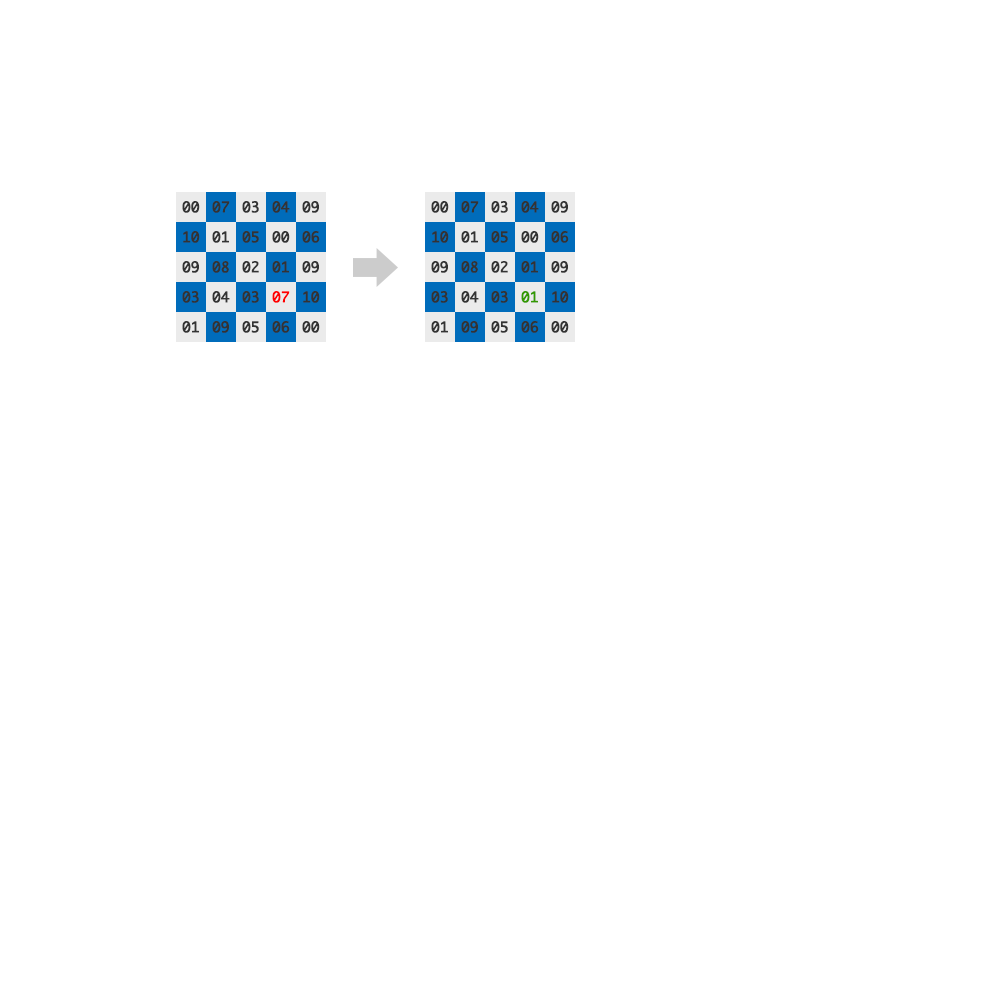
<style>
.page{position:relative;width:1000px;height:1000px;background:#ffffff}
.page>*{position:absolute;margin:0}
.t1{font:14px "Monaco";color:#333333;font-weight:bold}
.t2{font:14px "Monaco";color:#ff0000;font-weight:bold}
.t3{font:14px "Monaco";color:#339900;font-weight:bold}
</style>
<div class="page">
<p class="t1" style="left:182px;top:201px;width:18px;height:12px">00</p>
<p class="t1" style="left:212px;top:201px;width:18px;height:12px">07</p>
<p class="t1" style="left:242px;top:201px;width:17px;height:12px">03</p>
<p class="t1" style="left:272px;top:201px;width:18px;height:12px">04</p>
<p class="t1" style="left:302px;top:201px;width:17px;height:12px">09</p>
<p class="t1" style="left:431px;top:201px;width:18px;height:12px">00</p>
<p class="t1" style="left:461px;top:201px;width:18px;height:12px">07</p>
<p class="t1" style="left:491px;top:201px;width:17px;height:12px">03</p>
<p class="t1" style="left:521px;top:201px;width:18px;height:12px">04</p>
<p class="t1" style="left:551px;top:201px;width:17px;height:12px">09</p>
<p class="t1" style="left:183px;top:231px;width:17px;height:12px">10</p>
<p class="t1" style="left:212px;top:231px;width:17px;height:12px">01</p>
<p class="t1" style="left:242px;top:231px;width:17px;height:12px">05</p>
<p class="t1" style="left:272px;top:231px;width:18px;height:12px">00</p>
<p class="t1" style="left:302px;top:231px;width:18px;height:12px">06</p>
<p class="t1" style="left:432px;top:231px;width:17px;height:12px">10</p>
<p class="t1" style="left:461px;top:231px;width:17px;height:12px">01</p>
<p class="t1" style="left:491px;top:231px;width:17px;height:12px">05</p>
<p class="t1" style="left:521px;top:231px;width:18px;height:12px">00</p>
<p class="t1" style="left:551px;top:231px;width:18px;height:12px">06</p>
<p class="t1" style="left:182px;top:261px;width:17px;height:12px">09</p>
<p class="t1" style="left:212px;top:261px;width:17px;height:12px">08</p>
<p class="t1" style="left:242px;top:261px;width:17px;height:12px">02</p>
<p class="t1" style="left:272px;top:261px;width:17px;height:12px">01</p>
<p class="t1" style="left:302px;top:261px;width:17px;height:12px">09</p>
<p class="t1" style="left:431px;top:261px;width:17px;height:12px">09</p>
<p class="t1" style="left:461px;top:261px;width:17px;height:12px">08</p>
<p class="t1" style="left:491px;top:261px;width:17px;height:12px">02</p>
<p class="t1" style="left:521px;top:261px;width:17px;height:12px">01</p>
<p class="t1" style="left:551px;top:261px;width:17px;height:12px">09</p>
<p class="t1" style="left:182px;top:291px;width:17px;height:12px">03</p>
<p class="t1" style="left:212px;top:291px;width:18px;height:12px">04</p>
<p class="t1" style="left:242px;top:291px;width:17px;height:12px">03</p>
<p class="t2" style="left:272px;top:291px;width:18px;height:12px">07</p>
<p class="t1" style="left:303px;top:291px;width:17px;height:12px">10</p>
<p class="t1" style="left:431px;top:291px;width:17px;height:12px">03</p>
<p class="t1" style="left:461px;top:291px;width:18px;height:12px">04</p>
<p class="t1" style="left:491px;top:291px;width:17px;height:12px">03</p>
<p class="t3" style="left:521px;top:291px;width:17px;height:12px">01</p>
<p class="t1" style="left:552px;top:291px;width:17px;height:12px">10</p>
<p class="t1" style="left:182px;top:321px;width:17px;height:12px">01</p>
<p class="t1" style="left:212px;top:321px;width:17px;height:12px">09</p>
<p class="t1" style="left:242px;top:321px;width:17px;height:12px">05</p>
<p class="t1" style="left:272px;top:321px;width:18px;height:12px">06</p>
<p class="t1" style="left:302px;top:321px;width:18px;height:12px">00</p>
<p class="t1" style="left:431px;top:321px;width:17px;height:12px">01</p>
<p class="t1" style="left:461px;top:321px;width:17px;height:12px">09</p>
<p class="t1" style="left:491px;top:321px;width:17px;height:12px">05</p>
<p class="t1" style="left:521px;top:321px;width:18px;height:12px">06</p>
<p class="t1" style="left:551px;top:321px;width:18px;height:12px">00</p>
</div>
